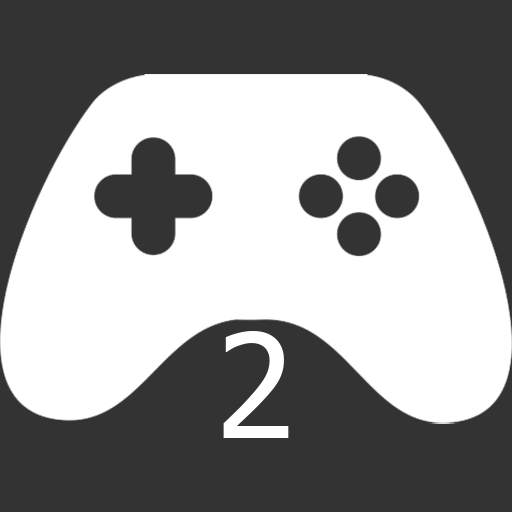
<style>
.page{position:relative;width:512px;height:512px;background:#333333}
.page>*{position:absolute;margin:0}
.t1{font:144px "Tahoma";color:#ffffff}
</style>
<div class="page">
<p class="t1" style="left:223px;top:331px;width:66px;height:107px">2</p>
</div>
